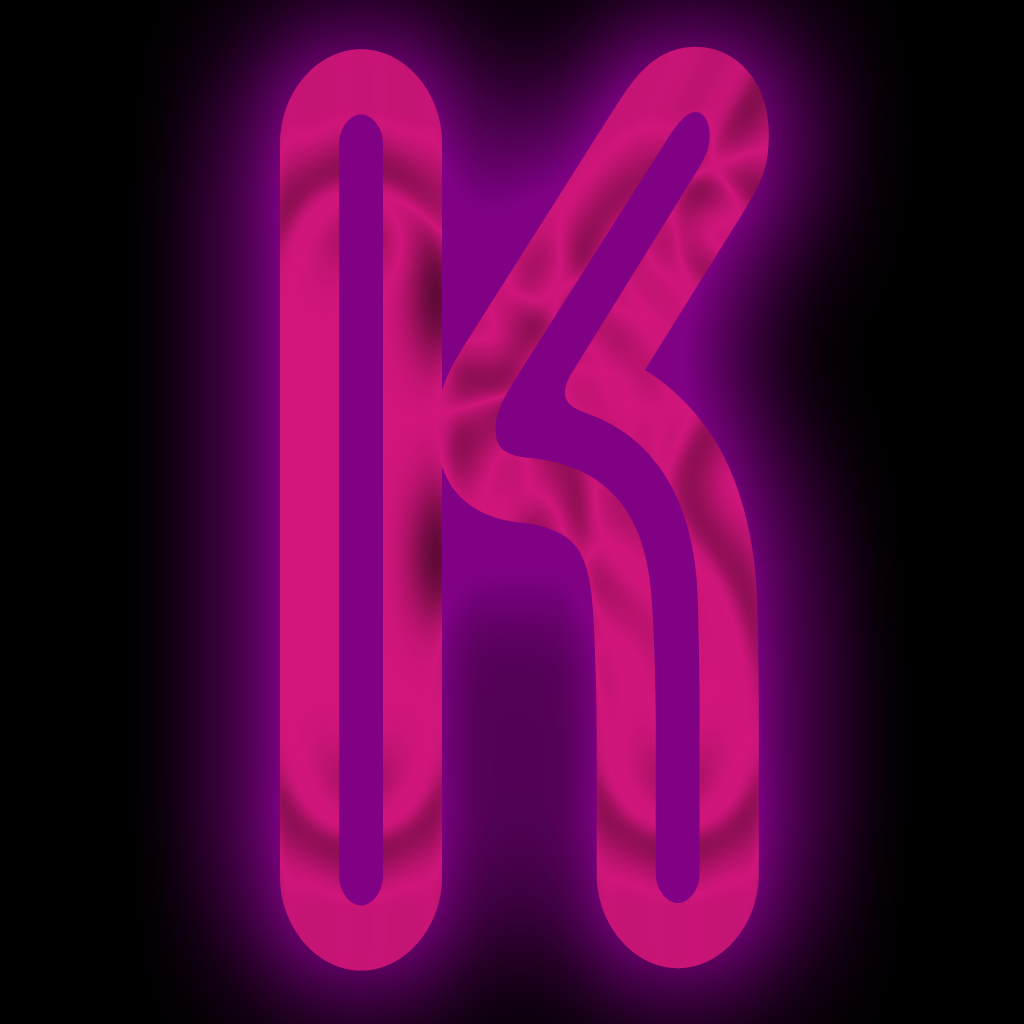
<style>
.page{position:relative;width:1024px;height:1024px;background:#000000}
.page>*{position:absolute;margin:0}
.t1{font:1187.5px "AeroliteSky";letter-spacing:-0.02em;color:#d0157b;font-weight:bold;scale:0.83 1}
</style>
<div class="page">
<p class="t1" style="left:280px;top:46px;width:489px;height:925px">K</p>
</div>
